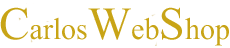
<style>
.page{position:relative;width:230px;height:48px;background:#ffffff}
.page>*{position:absolute;margin:0}
.t1{font:30.4px "MongolianBaiti";color:#c8a416}
.t2{font:46.3px "MongolianBaiti";color:#c8a416}
</style>
<div class="page">
<p class="t1" style="left:0px;top:7px;width:229px;height:39px"><span class="t2">C</span>arlos<span class="t2">W</span>eb<span class="t2">S</span>hop</p>
</div>
